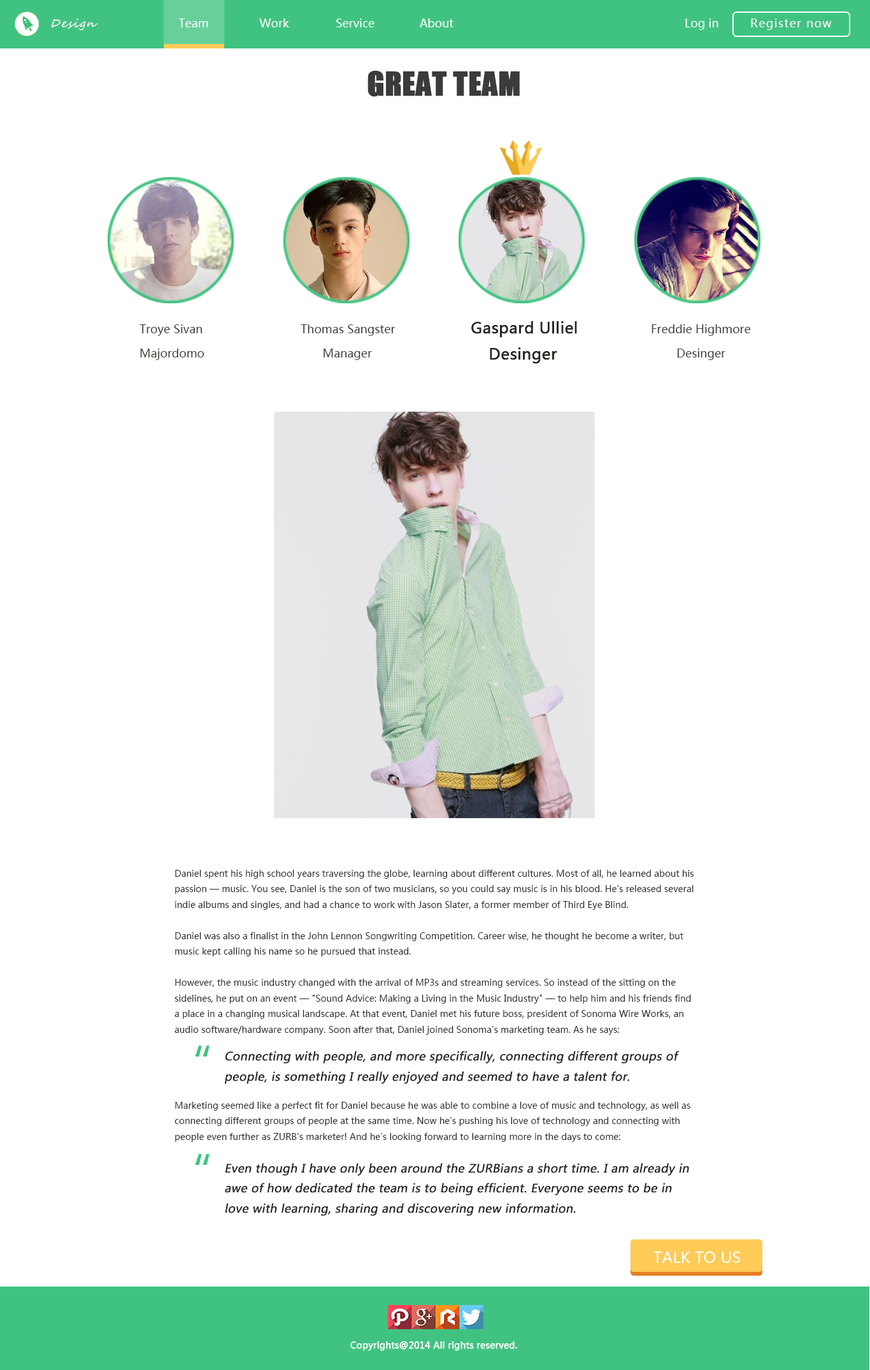
<style>
.page{position:relative;width:870px;height:1370px;background:#ffffff}
.page>*{position:absolute;margin:0}
.t1{font:11.5px "SegoeScript";letter-spacing:0.075em;color:#fff4ff;font-style:italic}
.t2{font:11.5px "MicrosoftYaHei";color:#ffffff}
.t3{font:11.5px "MicrosoftYaHei";letter-spacing:0.075em;color:#fff4ff}
.t4{font:30.6px "Impact";color:#393b3d;font-weight:bold}
.t5{font:11.5px "MicrosoftYaHei";color:#43413c}
.t6{font:15.3px "MicrosoftYaHei";color:#292824;font-weight:bold}
.t7{font:8.9px "MicrosoftYaHei";color:#292824}
.t8{font:45.9px "MicrosoftYaHei";color:#40c381}
.t9{font:11.5px "MicrosoftYaHei";color:#292824;font-weight:bold;font-style:italic}
.t10{font:15.3px "MicrosoftYaHei";color:#ffffff}
.t11{font:8.9px "MicrosoftYaHei";color:#ffffff;font-weight:bold}
</style>
<div class="page">
<p class="t1" style="left:51px;top:18px;width:46px;height:13px">Design</p>
<p class="t2" style="left:178px;top:18px;width:30px;height:9px">Team</p>
<p class="t2" style="left:259px;top:18px;width:30px;height:9px">Work</p>
<p class="t2" style="left:336px;top:18px;width:39px;height:9px">Service</p>
<p class="t2" style="left:420px;top:18px;width:34px;height:9px">About</p>
<p class="t2" style="left:686px;top:18px;width:33px;height:12px">Log in</p>
<p class="t3" style="left:751px;top:18px;width:81px;height:12px">Register now</p>
<p class="t4" style="left:368px;top:71px;width:152px;height:26px">GREAT TEAM</p>
<p class="t5" style="left:140px;top:324px;width:63px;height:12px">Troye Sivan</p>
<p class="t5" style="left:301px;top:324px;width:95px;height:12px">Thomas Sangster</p>
<p class="t6" style="left:472px;top:321px;width:105px;height:17px">Gaspard Ulliel</p>
<p class="t5" style="left:652px;top:324px;width:99px;height:12px">Freddie Highmore</p>
<p class="t5" style="left:140px;top:349px;width:65px;height:11px">Majordomo</p>
<p class="t5" style="left:324px;top:349px;width:48px;height:11px">Manager</p>
<p class="t6" style="left:490px;top:347px;width:68px;height:17px">Desinger</p>
<p class="t5" style="left:677px;top:349px;width:49px;height:11px">Desinger</p>
<p class="t7" style="left:175px;top:870px;width:519px;height:165px">Daniel spent his high school years traversing the globe, learning about different cultures. Most of all, he learned about his passion — music. You see, Daniel is the son of two musicians, so you could say music is in his blood. He's released several indie albums and singles, and had a chance to work with Jason Slater, a former member of Third Eye Blind.<br><br>Daniel was also a finalist in the John Lennon Songwriting Competition. Career wise, he thought he become a writer, but music kept calling his name so he pursued that instead.<br><br>However, the music industry changed with the arrival of MP3s and streaming services. So instead of the sitting on the sidelines, he put on an event — "Sound Advice: Making a Living in the Music Industry" — to help him and his friends find a place in a changing musical landscape. At that event, Daniel met his future boss, president of Sonoma Wire Works, an audio software/hardware company. Soon after that, Daniel joined Sonoma's marketing team. As he says:</p>
<p class="t8" style="left:195px;top:1046px;width:15px;height:10px">“</p>
<p class="t9" style="left:224px;top:1051px;width:456px;height:33px">Connecting with people, and more specifically, connecting different groups of people, is something I really enjoyed and seemed to have a talent for.</p>
<p class="t7" style="left:175px;top:1102px;width:516px;height:40px">Marketing seemed like a perfect fit for Daniel because he was able to combine a love of music and technology, as well as connecting different groups of people at the same time. Now he's pushing his love of technology and connecting with people even further as ZURB's marketer! And he's looking forward to learning more in the days to come:</p>
<p class="t8" style="left:195px;top:1154px;width:15px;height:11px">“</p>
<p class="t9" style="left:225px;top:1163px;width:464px;height:53px">Even though I have only been around the ZURBians a short time. I am already in awe of how dedicated the team is to being efficient. Everyone seems to be in love with learning, sharing and discovering new information.</p>
<p class="t10" style="left:654px;top:1251px;width:87px;height:12px">TALK TO US</p>
<p class="t11" style="left:350px;top:1341px;width:167px;height:10px">Copyrights@2014 All rights reserved.</p>
</div>
